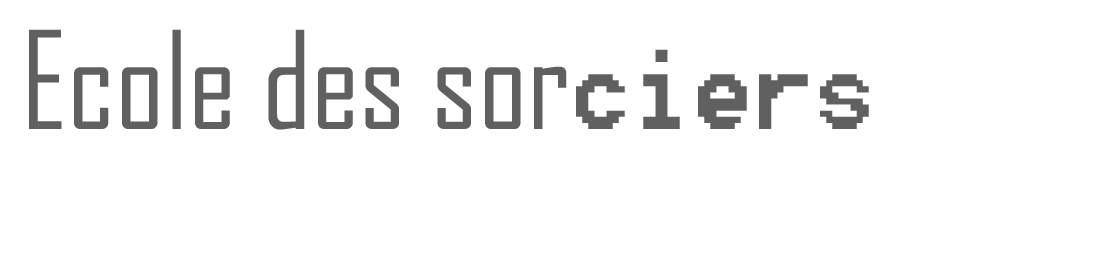
<style>
.page{position:relative;width:1101px;height:262px;background:#ffffff}
.page>*{position:absolute;margin:0}
.t1{font:130px "AgencyFB-Reg";color:#606060}
.t2{font:130px "8514oem";color:#606060}
</style>
<div class="page">
<p class="t1" style="left:29px;top:29px;width:840px;height:101px">Ecole des sor<span class="t2">ciers</span></p>
</div>
